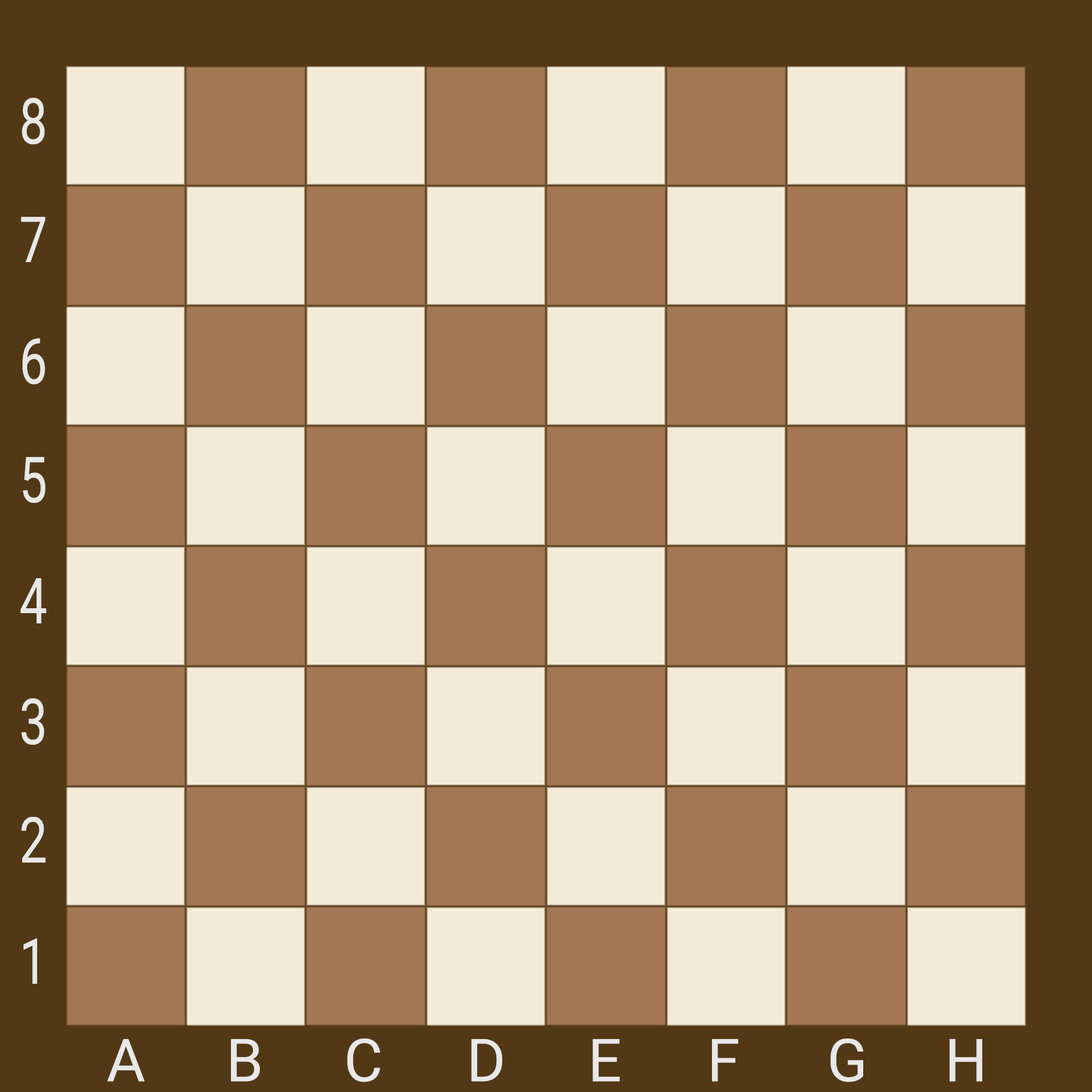
<style>
.page{position:relative;width:1092px;height:1092px;background:#f3ebd7}
.page>*{position:absolute;margin:0}
.t1{font:63.5px "Roboto-Regular";letter-spacing:0.02em;color:#e8e8e8;scale:0.78 1}
.t2{font:59.2px "Roboto-Regular";letter-spacing:0.02em;color:#e8e8e8}
</style>
<div class="page">
<p class="t1" style="left:22px;top:98px;width:23px;height:47px">8</p>
<p class="t1" style="left:21px;top:217px;width:24px;height:45px">7</p>
<p class="t1" style="left:22px;top:338px;width:23px;height:46px">6</p>
<p class="t1" style="left:23px;top:457px;width:22px;height:46px">5</p>
<p class="t1" style="left:20px;top:578px;width:26px;height:46px">4</p>
<p class="t1" style="left:21px;top:698px;width:23px;height:47px">3</p>
<p class="t1" style="left:21px;top:817px;width:25px;height:46px">2</p>
<p class="t1" style="left:23px;top:938px;width:14px;height:46px">1</p>
<p class="t2" style="left:107px;top:1039px;width:38px;height:43px">A</p>
<p class="t2" style="left:231px;top:1039px;width:29px;height:43px">B</p>
<p class="t2" style="left:347px;top:1038px;width:33px;height:44px">C</p>
<p class="t2" style="left:471px;top:1039px;width:31px;height:43px">D</p>
<p class="t2" style="left:592px;top:1039px;width:28px;height:43px">E</p>
<p class="t2" style="left:712px;top:1039px;width:26px;height:43px">F</p>
<p class="t2" style="left:830px;top:1038px;width:33px;height:44px">G</p>
<p class="t2" style="left:949px;top:1039px;width:33px;height:43px">H</p>
</div>
